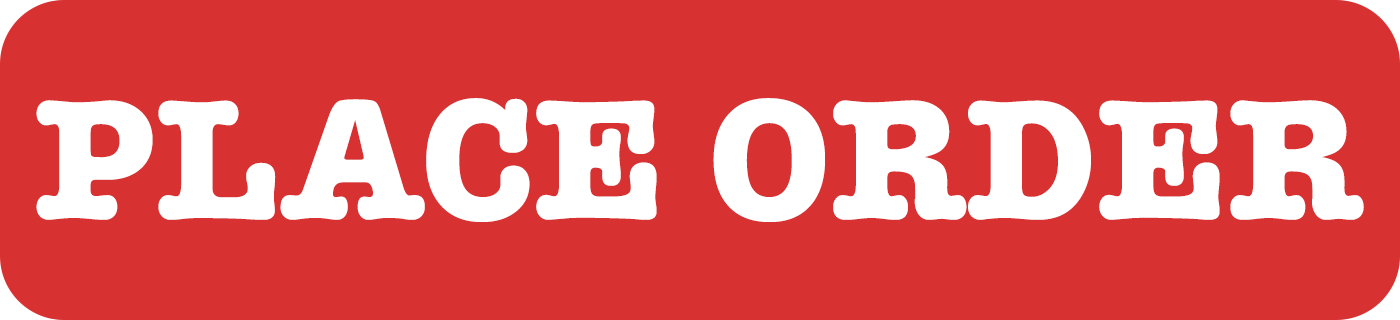
<style>
.page{position:relative;width:1400px;height:320px;background:#d83131}
.page>*{position:absolute;margin:0}
.t1{font:176px "AmericanTypewriter-Bold";color:#ffffff}
</style>
<div class="page">
<p class="t1" style="left:36px;top:98px;width:1328px;height:124px">PLACE ORDER</p>
</div>
